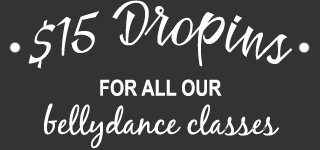
<style>
.page{position:relative;width:320px;height:150px;background:#333333}
.page>*{position:absolute;margin:0}
.t1{font:85px "BadheadTypeface";color:#ffffff}
.t2{font:35px/38px "BlackJackRegular";color:#ffffff}
.t3{font:22px/38px "ArialNarrow-Bold";color:#ffffff}
</style>
<div class="page">
<p class="t1" style="left:28px;top:0px;width:264px;height:69px">$15 Dropins</p>
<p class="t2" style="left:44px;top:79px;width:235px;height:70px;text-align:center"><span class="t3">FOR ALL OUR<br></span>bellydance classes</p>
</div>
